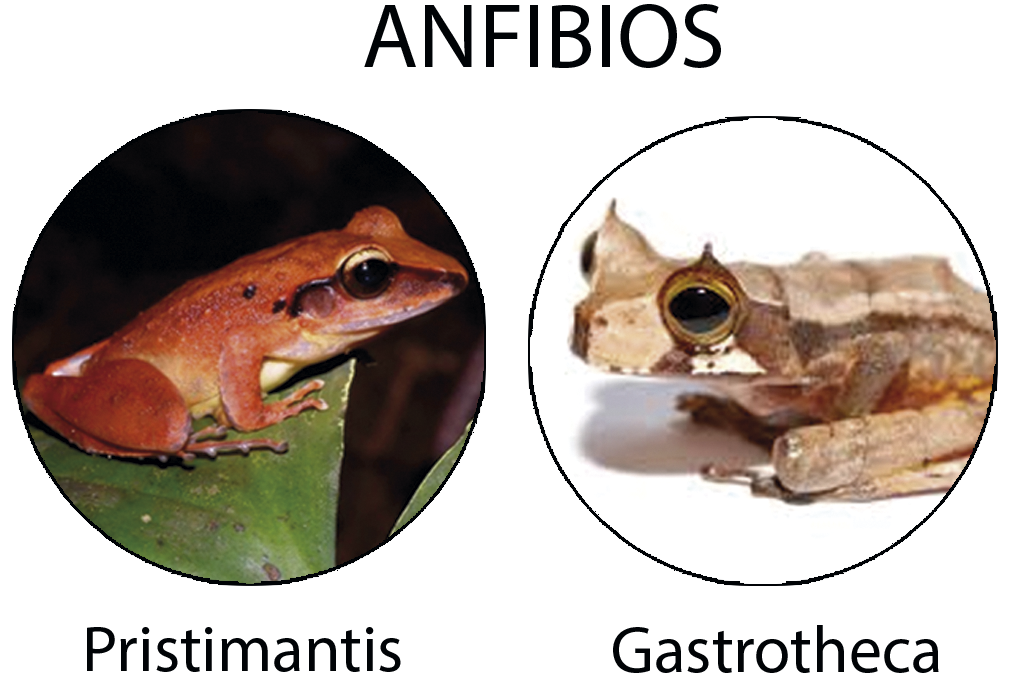
<style>
.page{position:relative;width:1010px;height:684px;background:#ffffff}
.page>*{position:absolute;margin:0}
.t1{font:91.7px "MyriadPro-Regular";color:#000306}
.t2{font:65.9px "MyriadPro-Regular";color:#000306}
</style>
<div class="page">
<p class="t1" style="left:364px;top:4px;width:357px;height:64px">ANFIBIOS</p>
<p class="t2" style="left:87px;top:627px;width:314px;height:45px">Pristimantis</p>
<p class="t2" style="left:613px;top:625px;width:326px;height:48px">Gastrotheca</p>
</div>
